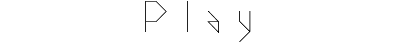
<style>
.page{position:relative;width:396px;height:43px;background:#ffffff}
.page>*{position:absolute;margin:0}
.t1{font:43.4px "Stick-Light";color:#000000}
</style>
<div class="page">
<p class="t1" style="left:145px;top:1px;width:106px;height:41px">Play</p>
</div>
